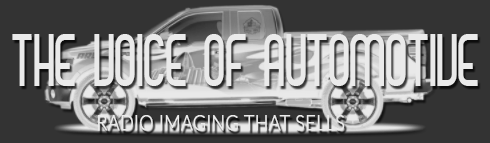
<style>
.page{position:relative;width:490px;height:143px;background:#333333}
.page>*{position:absolute;margin:0}
.t1{font:57.6px "MadameButterfly";letter-spacing:-0.05em;color:#eaeaea;text-transform:uppercase;scale:0.83 1}
.t2{font:21.4px "Lato-Light";color:#eaeaea;text-transform:uppercase;font-weight:bold;scale:0.83 1}
</style>
<div class="page">
<p class="t1" style="left:12px;top:34px;width:466px;height:52px">the voice of automotive</p>
<p class="t2" style="left:98px;top:115px;width:247px;height:16px">radio imaging that sells</p>
</div>
